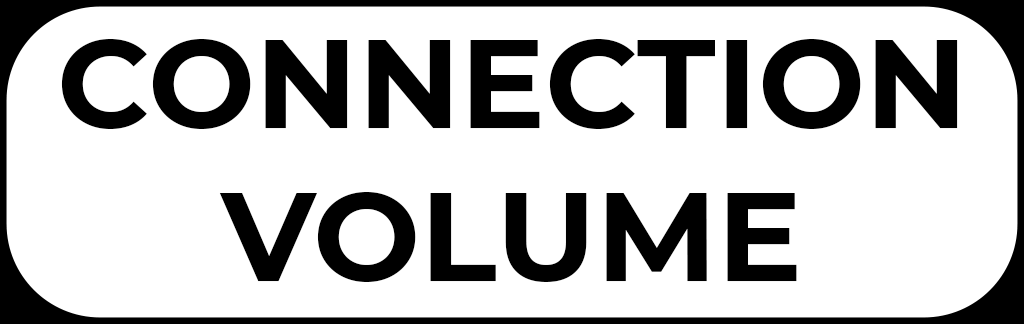
<style>
.page{position:relative;width:1024px;height:324px;background:#ffffff}
.page>*{position:absolute;margin:0}
.t1{font:127px "Montserrat-Bold";color:#000000}
</style>
<div class="page">
<p class="t1" style="left:61px;top:39px;width:897px;height:243px;text-align:center">CONNECTION <br>VOLUME</p>
</div>
